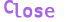
<style>
.page{position:relative;width:66px;height:22px;background:#ffffff}
.page>*{position:absolute;margin:0}
.t1{font:17.5px "Menlo-Regular";color:#a765e5;font-weight:bold}
</style>
<div class="page">
<p class="t1" style="left:4px;top:0px;width:10px;height:14px">C</p>
<p class="t1" style="left:13px;top:3px;width:42px;height:15px">lose</p>
</div>
